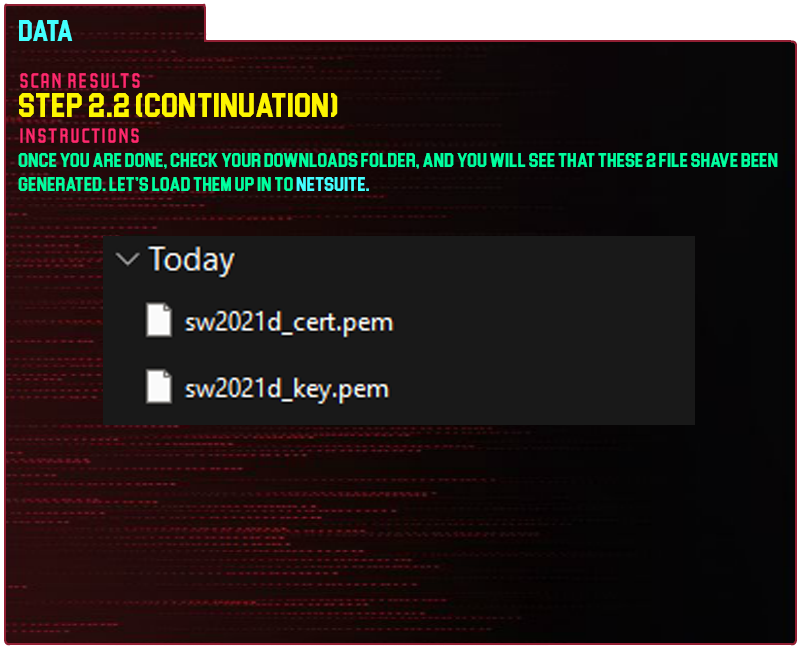
<style>
.page{position:relative;width:800px;height:650px}
.page>*{position:absolute;margin:0}
.t1{font:30px "Blockletter";color:#43ffff}
.t2{font:35px "Party-Lights-[WLM]-Flat";color:#ff296d}
.t3{font:35px "Blockletter";color:#fdf500}
.t4{font:20px "Blockletter";color:#00ff9f}
.t5{font:20px "Blockletter";color:#43ffff}
</style>
<div class="page">
<p class="t1" style="left:19px;top:20px;width:54px;height:21px">Data</p>
<p class="t2" style="left:20px;top:73px;width:120px;height:15px">Scan REsults</p>
<p class="t3" style="left:19px;top:93px;width:319px;height:24px">step 2.2 (continuation)</p>
<p class="t2" style="left:20px;top:128px;width:119px;height:15px">instructions</p>
<p class="t4" style="left:18px;top:153px;width:760px;height:38px">once you are done, check your downloads folder, and you will see that these 2 file shave been generated. Let’s load them up in to <span class="t5">netsuite.</span></p>
</div>
